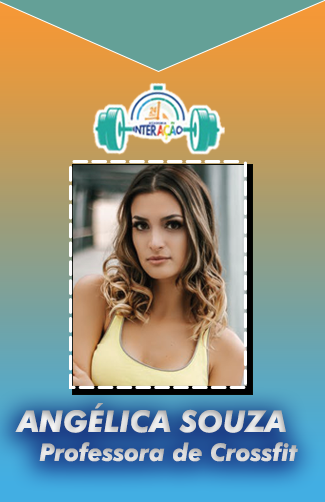
<style>
.page{position:relative;width:325px;height:502px}
.page>*{position:absolute;margin:0}
.t1{font:24px "FuturaBT-BoldItalic";color:#dadada}
.t2{font:30px "FuturaBT-BoldItalic";color:#dadada}
</style>
<div class="page">
<p class="t1" style="left:15px;top:403px;width:283px;height:59px"><span class="t2">ANGÉLICA SOUZA<br></span>    Professora de Crossfit</p>
</div>
